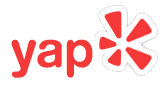
<style>
.page{position:relative;width:160px;height:88px;background:#ffffff}
.page>*{position:absolute;margin:0}
.t1{font:48px "RockoFLF-Bold";letter-spacing:0.025em;color:#f43939}
</style>
<div class="page">
<p class="t1" style="left:11px;top:39px;width:82px;height:39px">yap</p>
</div>
